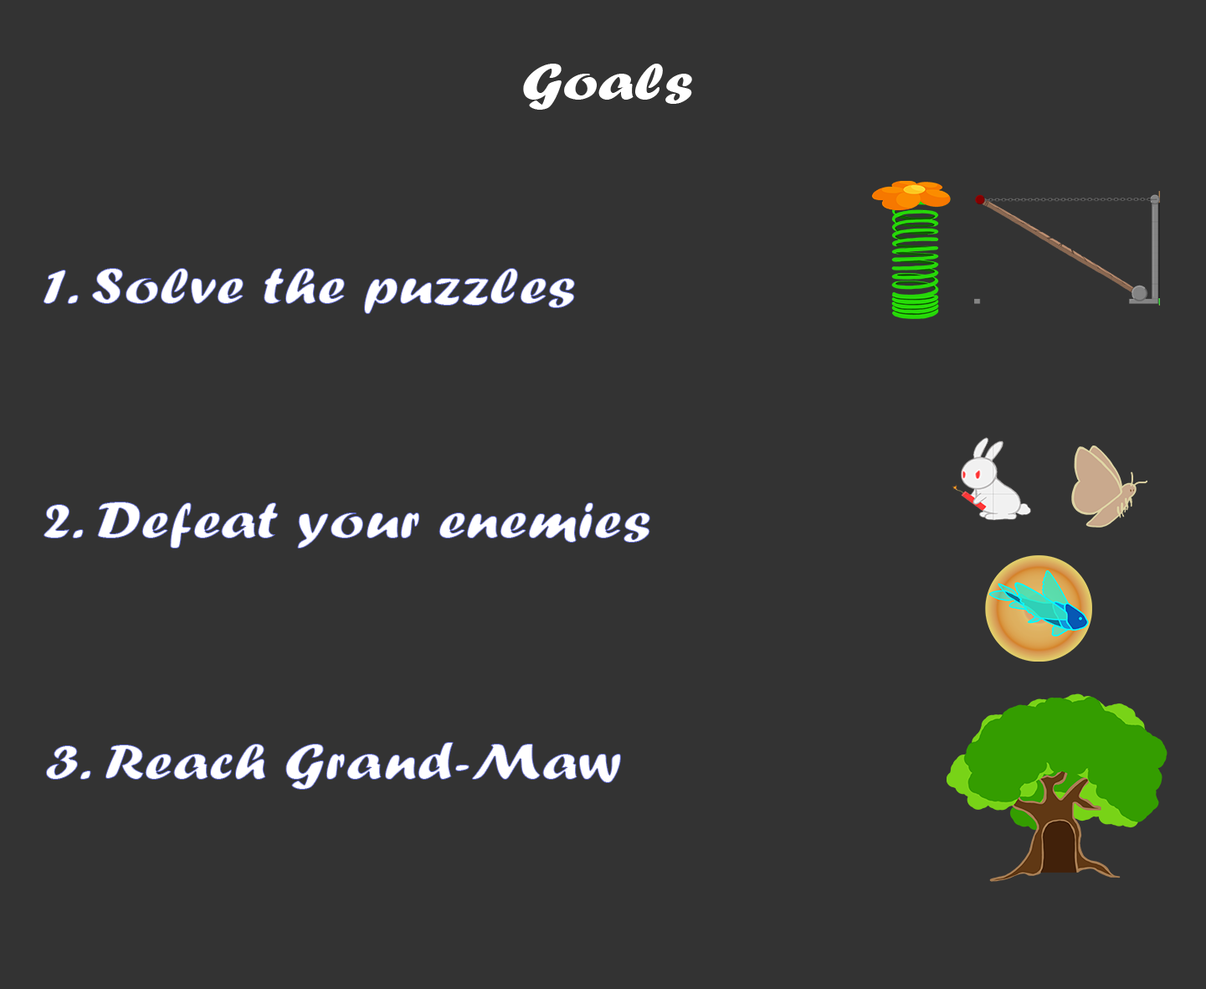
<style>
.page{position:relative;width:1206px;height:989px;background:#333333}
.page>*{position:absolute;margin:0}
.t1{font:53.6px "ForteMT";color:#ffffff;scale:1.22 1}
</style>
<div class="page">
<p class="t1" style="left:523px;top:64px;width:169px;height:46px">Goals</p>
<p class="t1" style="left:43px;top:268px;width:532px;height:46px">1. Solve the puzzles</p>
<p class="t1" style="left:44px;top:501px;width:606px;height:47px">2. Defeat your enemies</p>
<p class="t1" style="left:45px;top:742px;width:576px;height:47px">3. Reach Grand-Maw</p>
</div>
